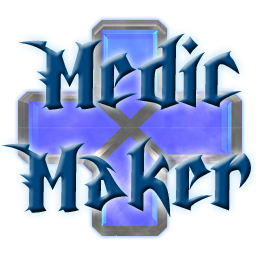
<style>
.page{position:relative;width:256px;height:256px;background:#ffffff}
.page>*{position:absolute;margin:0}
.t1{font:85.8px "UnrealTournament";scale:0.83 1}
</style>
<div class="page">
<p class="t1" style="left:2px;top:33px;width:249px;height:185px;text-align:center;rotate:-1deg">Medic<br>Maker</p>
</div>
